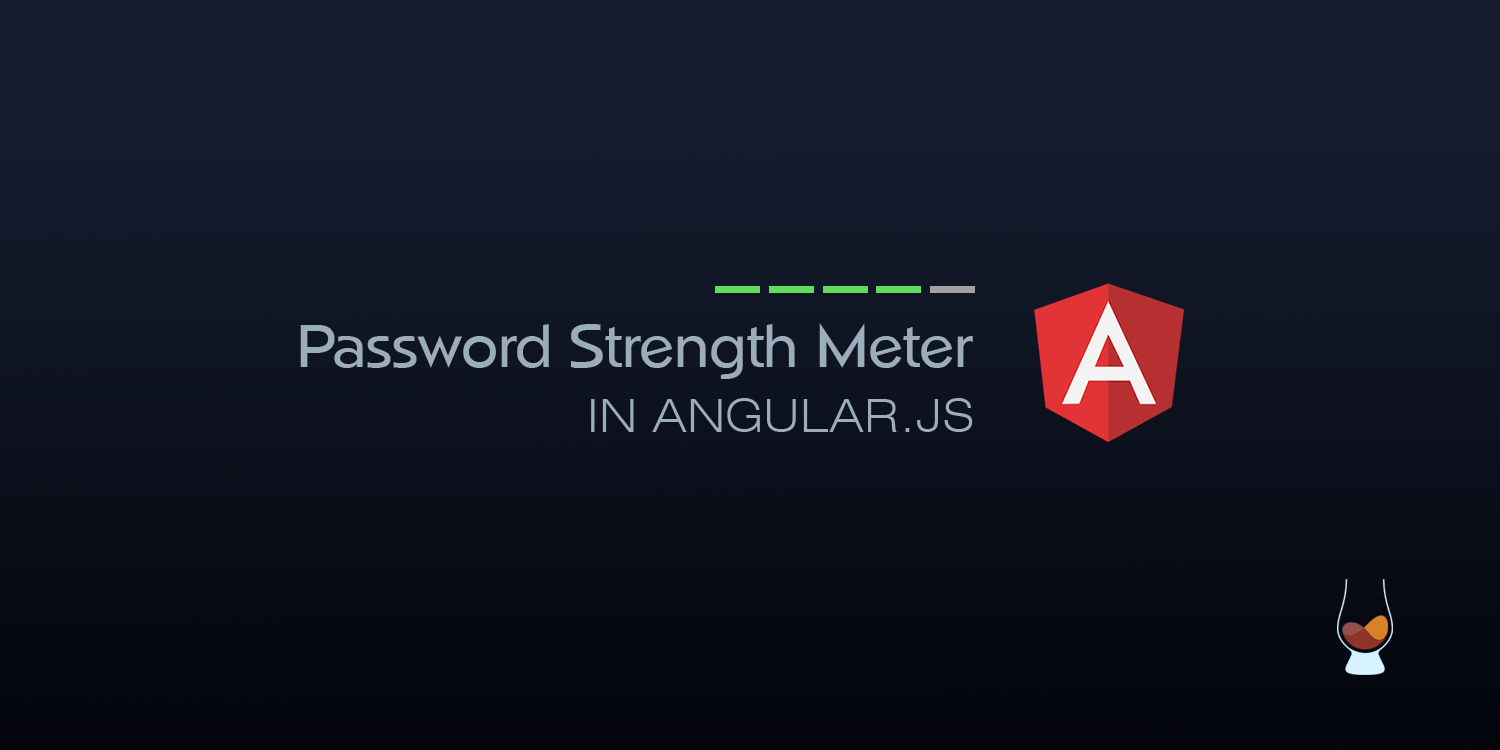
<style>
.page{position:relative;width:1500px;height:750px}
.page>*{position:absolute;margin:0}
.t1{font:58.3px "Napoli-Medium";color:#9bacbb}
.t2{font:45.8px "Swiss721BT-LightExtended";color:#9bacbb}
</style>
<div class="page">
<p class="t1" style="left:300px;top:323px;width:673px;height:56px">Password Strength Meter</p>
<p class="t2" style="left:591px;top:398px;width:382px;height:34px">IN ANGULAR.JS</p>
</div>
